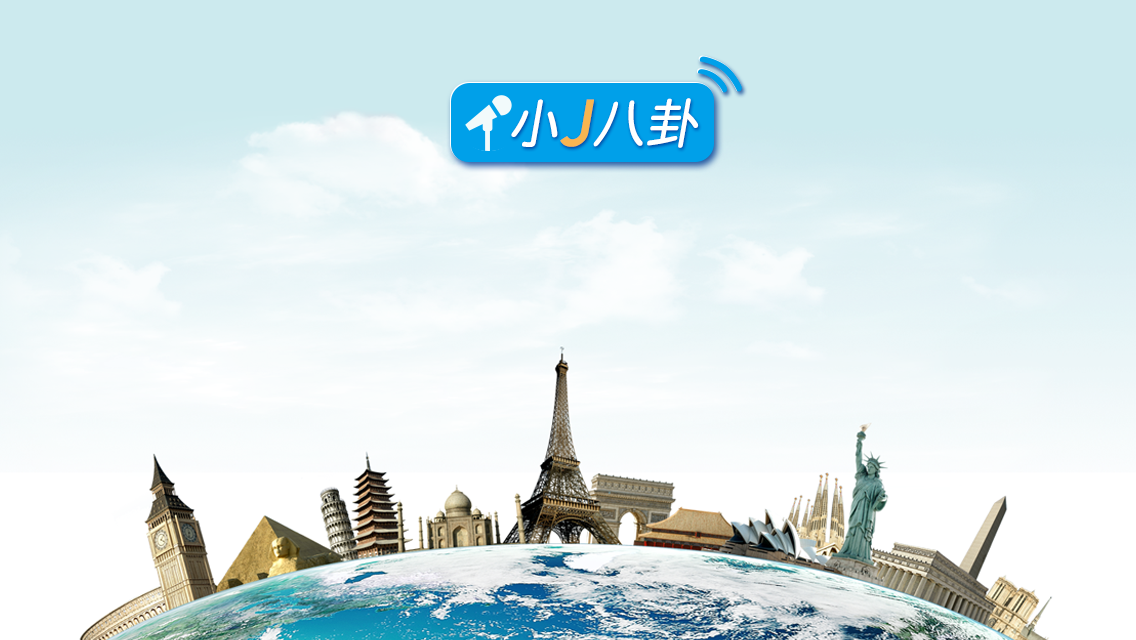
<style>
.page{position:relative;width:1136px;height:640px}
.page>*{position:absolute;margin:0}
.t1{font:51.4px "STYuanti-SC-Regular";color:#ffffff;font-weight:bold;font-style:italic}
.t2{font:65.1px "DINAlternate-Bold";color:#f8b551;font-weight:bold;font-style:italic}
</style>
<div class="page">
<p class="t1" style="left:511px;top:98px;width:188px;height:50px">小<span class="t2">J</span>八卦</p>
</div>
